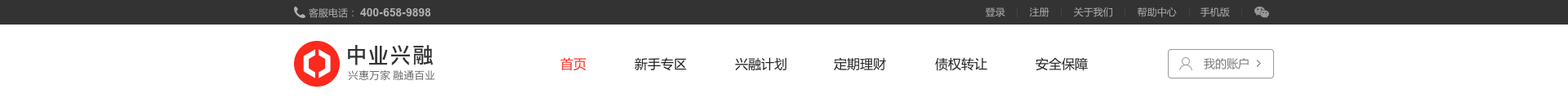
<style>
.page{position:relative;width:1568px;height:103px;background:#ffffff}
.page>*{position:absolute;margin:0}
.t1{font:9.8px "MicrosoftYaHei";color:#b0b0b0}
.t2{font:11.4px "Arial-BoldMT";color:#b0b0b0}
.t3{font:13.1px "MicrosoftYaHei";color:#fc291d}
.t4{font:13.1px "MicrosoftYaHei";color:#222222}
.t5{font:11.4px "MicrosoftYaHei";color:#7a7a7a}
</style>
<div class="page">
<p class="t1" style="left:309px;top:8px;width:45px;height:10px">客服电话：</p>
<p class="t2" style="left:360px;top:7px;width:71px;height:10px">400-658-9898</p>
<p class="t1" style="left:985px;top:7px;width:20px;height:10px">登录</p>
<p class="t1" style="left:1030px;top:7px;width:19px;height:10px">注册</p>
<p class="t1" style="left:1074px;top:7px;width:38px;height:10px">关于我们</p>
<p class="t1" style="left:1138px;top:7px;width:39px;height:10px">帮助中心</p>
<p class="t1" style="left:1200px;top:7px;width:30px;height:10px">手机版</p>
<p class="t3" style="left:560px;top:57px;width:26px;height:14px">首页</p>
<p class="t4" style="left:635px;top:57px;width:52px;height:14px">新手专区</p>
<p class="t4" style="left:735px;top:57px;width:51px;height:14px">兴融计划</p>
<p class="t4" style="left:834px;top:57px;width:52px;height:14px">定期理财</p>
<p class="t4" style="left:935px;top:57px;width:52px;height:14px">债权转让</p>
<p class="t4" style="left:1036px;top:57px;width:52px;height:14px">安全保障</p>
<p class="t5" style="left:1204px;top:58px;width:45px;height:11px">我的账户</p>
</div>
